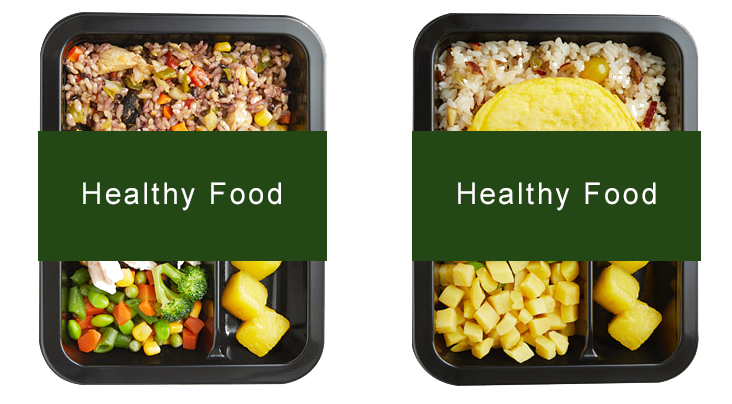
<style>
.page{position:relative;width:732px;height:404px;background:#ffffff}
.page>*{position:absolute;margin:0}
.t1{font:30px "ArialMT";letter-spacing:0.09em;color:#ffffff;scale:0.97 1}
</style>
<div class="page">
<p class="t1" style="left:83px;top:182px;width:198px;height:29px">Healthy Food</p>
<p class="t1" style="left:458px;top:182px;width:198px;height:29px">Healthy Food</p>
</div>
